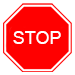
<style>
.page{position:relative;width:75px;height:75px;background:#ff0000}
.page>*{position:absolute;margin:0}
.t1{font:18px "ArialMT";color:#ffffff}
</style>
<div class="page">
<p class="t1" style="left:13px;top:31px;width:48px;height:13px">STOP</p>
</div>
